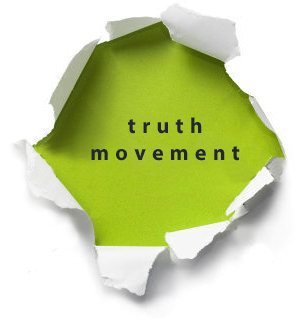
<style>
.page{position:relative;width:295px;height:318px;background:#ffffff}
.page>*{position:absolute;margin:0}
.t1{font:22px "MyriadPro-Bold";letter-spacing:0.28em;color:#202636}
</style>
<div class="page">
<p class="t1" style="left:91px;top:117px;width:149px;height:44px;text-align:center">truth<br>movement</p>
</div>
